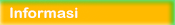
<style>
.page{position:relative;width:175px;height:25px;background:#ffba00}
.page>*{position:absolute;margin:0}
.t1{font:14.2px "ArialRoundedMTBold";color:#fdfcfc;scale:1.07 1}
</style>
<div class="page">
<p class="t1" style="left:10px;top:7px;width:68px;height:11px">Informasi</p>
</div>
